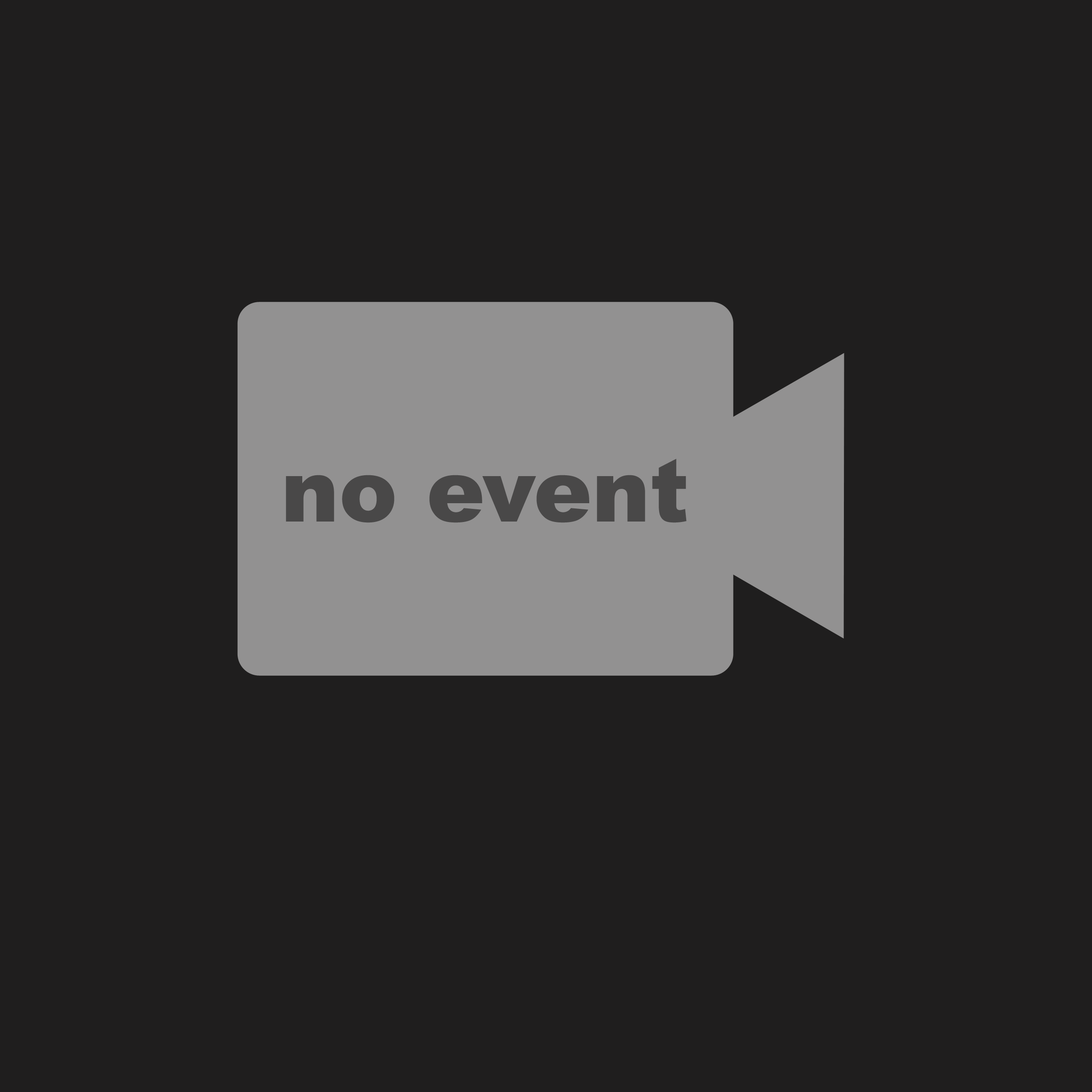
<style>
.page{position:relative;width:1092px;height:1092px;background:#1f1e1e}
.page>*{position:absolute;margin:0}
.t1{font:87.4px "Arial-Black";color:#494848}
</style>
<div class="page">
<p class="t1" style="left:286px;top:459px;width:401px;height:64px">no event</p>
</div>
